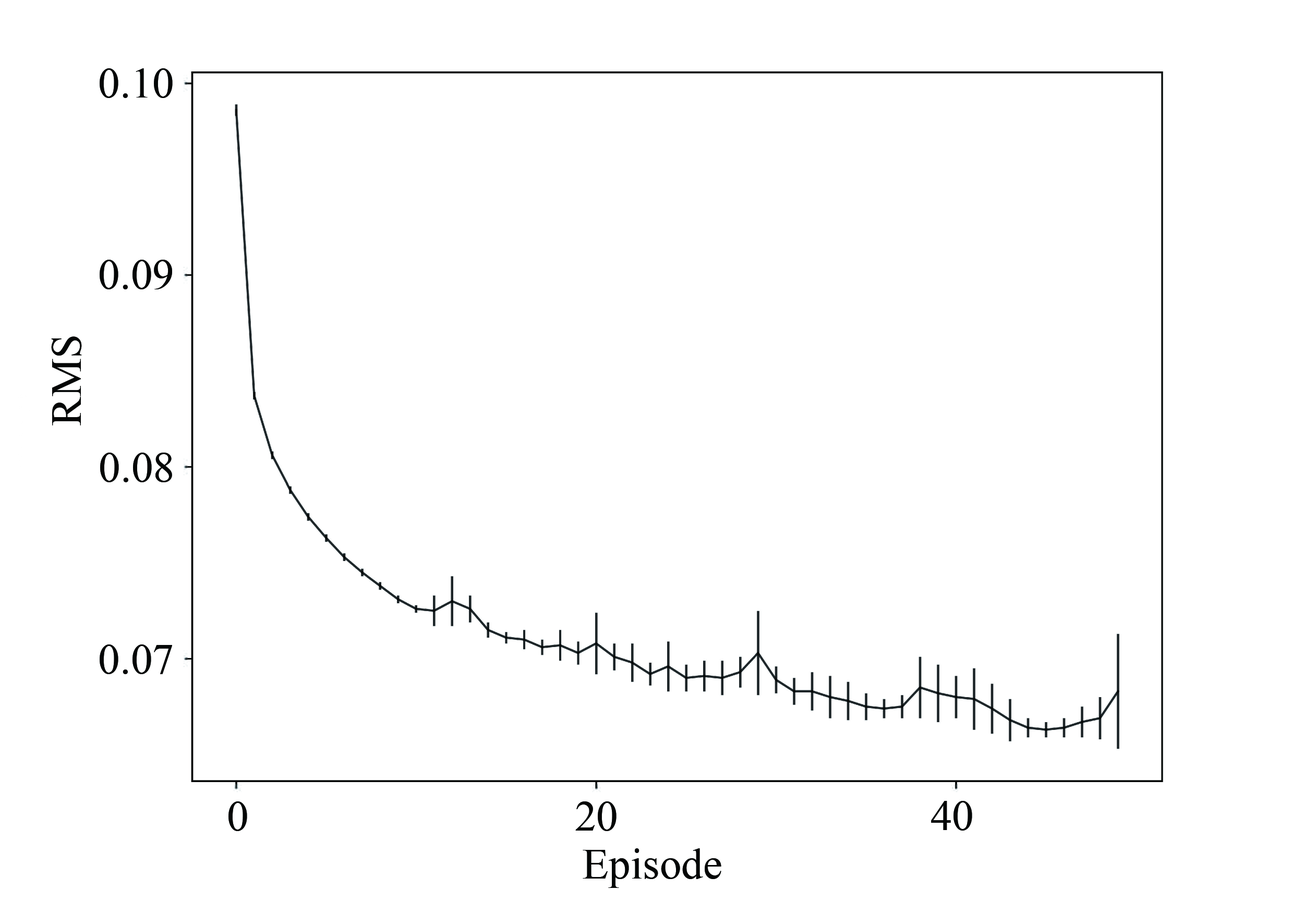
<style>
.page{position:relative;width:1304px;height:914px;background:#ffffff}
.page>*{position:absolute;margin:0}
.t1{font:43.5px "TimesNewRomanPSMT";color:#040606}
</style>
<div class="page">
<p class="t1" style="left:100px;top:68px;width:73px;height:30px">0.10</p>
<p class="t1" style="left:100px;top:260px;width:72px;height:30px">0.09</p>
<p class="t1" style="left:51px;top:336px;width:31px;height:90px;rotate:180deg">RMS</p>
<p class="t1" style="left:100px;top:453px;width:72px;height:30px">0.08</p>
<p class="t1" style="left:100px;top:645px;width:72px;height:29px">0.07</p>
<p class="t1" style="left:228px;top:802px;width:19px;height:29px">0</p>
<p class="t1" style="left:575px;top:802px;width:42px;height:29px">20</p>
<p class="t1" style="left:931px;top:801px;width:41px;height:30px">40</p>
<p class="t1" style="left:583px;top:849px;width:138px;height:39px">Episode</p>
</div>
